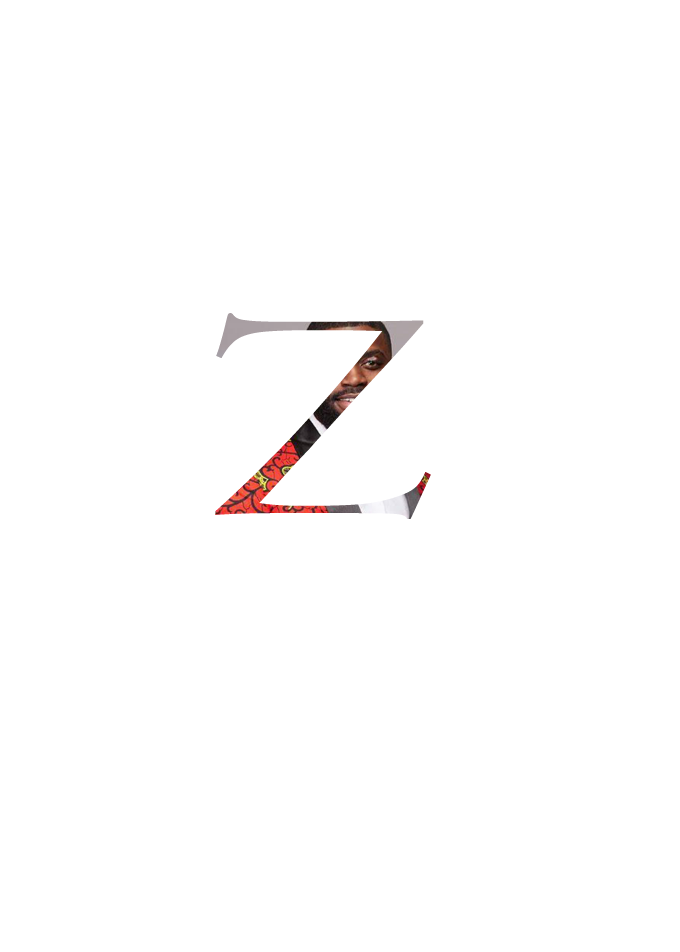
<style>
.page{position:relative;width:680px;height:952px;background:#ffffff}
.page>*{position:absolute;margin:0}
.t1{font:307.4px "Centaur";scale:1.15 1}
</style>
<div class="page">
<p class="t1" style="left:215px;top:313px;width:216px;height:206px">Z</p>
</div>
